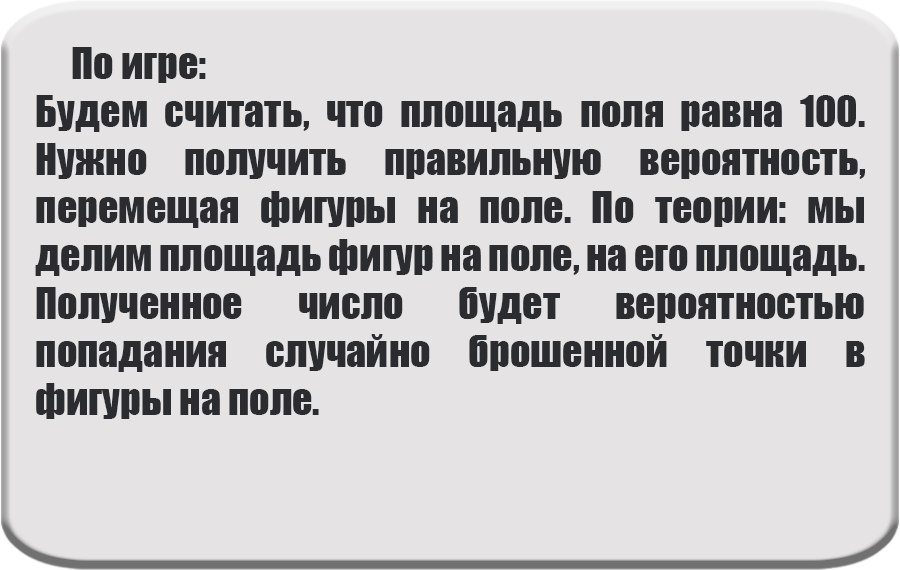
<style>
.page{position:relative;width:900px;height:570px;background:#e5e3e3}
.page>*{position:absolute;margin:0}
.t1{font:40px "Impact";color:#2a2c30}
</style>
<div class="page">
<p class="t1" style="left:35px;top:47px;width:830px;height:372px;text-align:justify">По игре:<br>Будем считать, что площадь поля равна 100. Нужно получить правильную вероятность, перемещая фигуры на поле. По теории: мы делим площадь фигур на поле, на его площадь. Полученное число будет вероятностью попадания случайно брошенной точки в фигуры на поле.</p>
</div>
